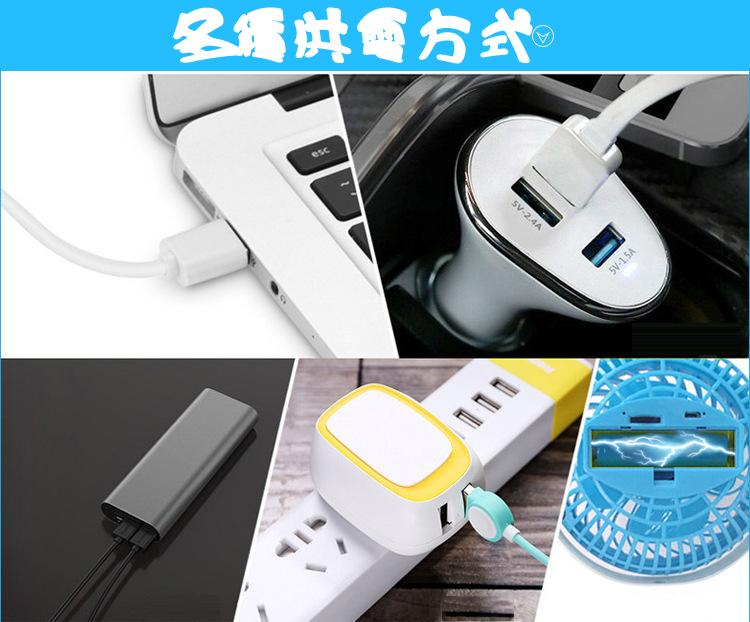
<style>
.page{position:relative;width:750px;height:622px}
.page>*{position:absolute;margin:0}
.t1{font:60px "HanWangCC02";letter-spacing:-0.01em;color:#ffffff;font-weight:bold}
</style>
<div class="page">
<p class="t1" style="left:173px;top:7px;width:360px;height:57px">多種供電方式</p>
</div>
